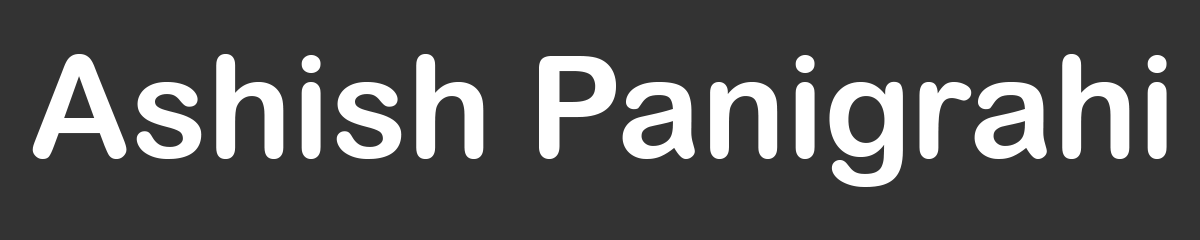
<style>
.page{position:relative;width:1200px;height:240px;background:#333333}
.page>*{position:absolute;margin:0}
.t1{font:141.2px "ArialRoundedMTBold";color:#ffffff}
</style>
<div class="page">
<p class="t1" style="left:32px;top:54px;width:1135px;height:133px">Ashish Panigrahi</p>
</div>
